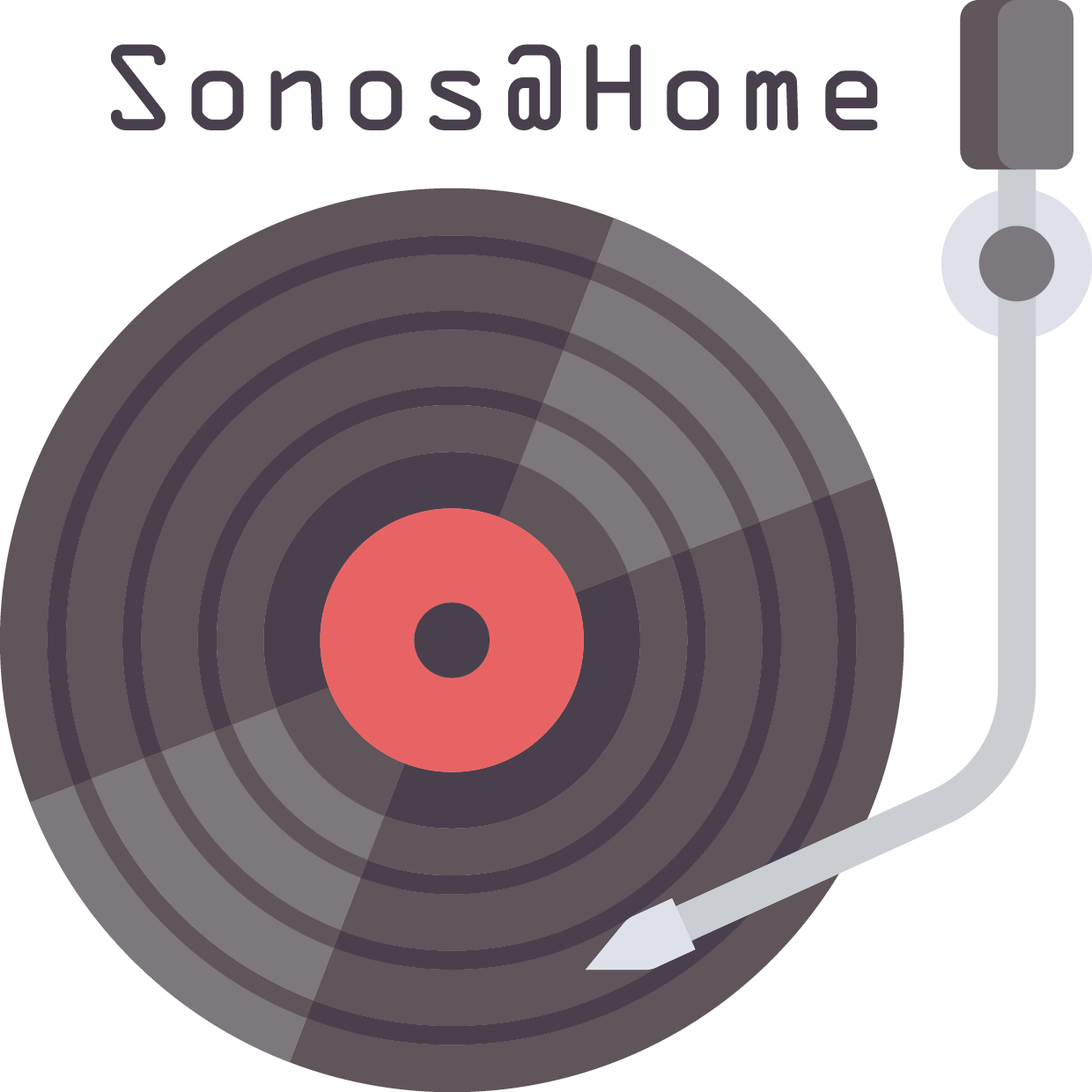
<style>
.page{position:relative;width:1092px;height:1092px;background:#ffffff}
.page>*{position:absolute;margin:0}
.t1{font:110.1px "OCRAStd";color:#4a404d}
</style>
<div class="page">
<p class="t1" style="left:111px;top:44px;width:767px;height:86px">Sonos@Home</p>
</div>
